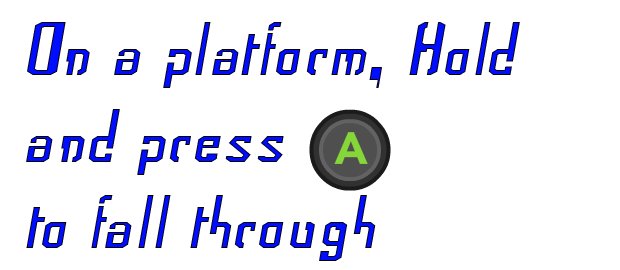
<style>
.page{position:relative;width:620px;height:270px;background:#ffffff}
.page>*{position:absolute;margin:0}
.t1{font:72px "Frak-Regular";color:#000dff}
</style>
<div class="page">
<p class="t1" style="left:26px;top:22px;width:494px;height:239px">On a platform, Hold       <br>and press<br>to fall through</p>
</div>
